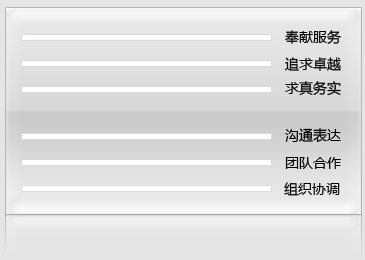
<style>
.page{position:relative;width:365px;height:260px}
.page>*{position:absolute;margin:0}
.t1{font:14px "MicrosoftYaHei";color:#000000}
</style>
<div class="page">
<p class="t1" style="left:285px;top:30px;width:56px;height:14px">奉献服务</p>
<p class="t1" style="left:285px;top:57px;width:56px;height:14px">追求卓越</p>
<p class="t1" style="left:285px;top:81px;width:56px;height:15px">求真务实</p>
<p class="t1" style="left:285px;top:128px;width:56px;height:14px">沟通表达</p>
<p class="t1" style="left:285px;top:157px;width:56px;height:12px">团队合作</p>
<p class="t1" style="left:284px;top:182px;width:56px;height:14px">组织协调</p>
</div>
